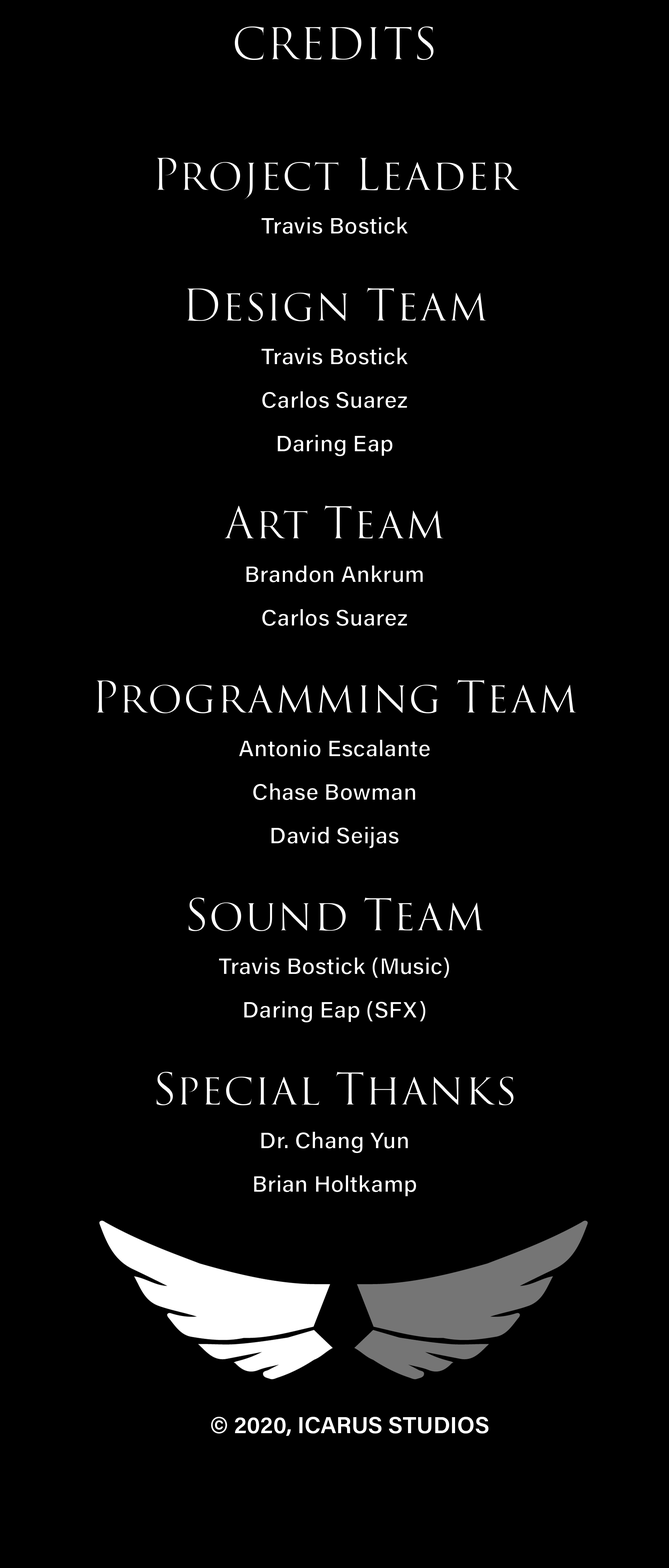
<style>
.page{position:relative;width:669px;height:1568px;background:#000000}
.page>*{position:absolute;margin:0}
.t1{font:23.2px/43.6px "AcuminPro-Semibold";color:#ffffff}
.t2{font:43.6px/8.7px "MyriadPro-Regular";color:#000000}
.t3{font:43.6px/8.7px "TrajanPro3-Regular";color:#ffffff}
.t4{font:43.6px/43.6px "TrajanPro3-Regular";color:#ffffff}
.t5{font:23.2px "AcuminPro-Semibold";color:#ffffff}
</style>
<div class="page">
<p class="t1" style="left:95px;top:26px;width:483px;height:1171px;text-align:center"><span class="t2"><br></span><span class="t3">CREDITS<br><br><br></span><span class="t4">Project Leader<br></span>Travis Bostick<br><br><span class="t4">Design Team<br></span>Travis Bostick<br>Carlos Suarez<br>Daring Eap<br><br><span class="t4">Art Team<br></span>Brandon Ankrum<br>Carlos Suarez<br><br><span class="t4">Programming Team<br></span>Antonio Escalante<br>Chase Bowman<br>David Seijas<br><br><span class="t4">Sound Team<br></span>Travis Bostick (Music)<br>Daring Eap (SFX)<br><br><span class="t4">Special Thanks</span><br>Dr. Chang Yun<br>Brian Holtkamp</p>
<p class="t5" style="left:211px;top:1417px;width:278px;height:19px">© 2020, ICARUS STUDIOS</p>
</div>
